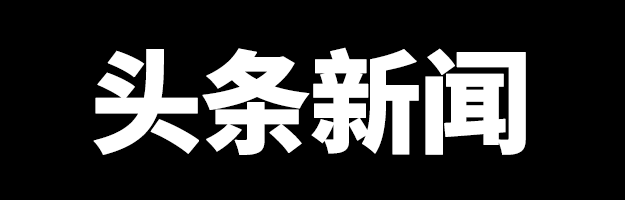
<style>
.page{position:relative;width:625px;height:200px;background:#000000}
.page>*{position:absolute;margin:0}
.t1{font:111px "SourceHanSansCN-Heavy";letter-spacing:-0.04em;color:#ffffff;font-weight:bold}
</style>
<div class="page">
<p class="t1" style="left:93px;top:47px;width:433px;height:108px">头条新闻</p>
</div>
